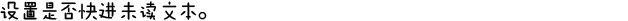
<style>
.page{position:relative;width:628px;height:21px;background:#ffffff}
.page>*{position:absolute;margin:0}
.t1{font:22px "¢è?";color:#000000}
</style>
<div class="page">
<p class="t1" style="left:0px;top:1px;width:207px;height:19px">设置是否快进未读文本。</p>
</div>
